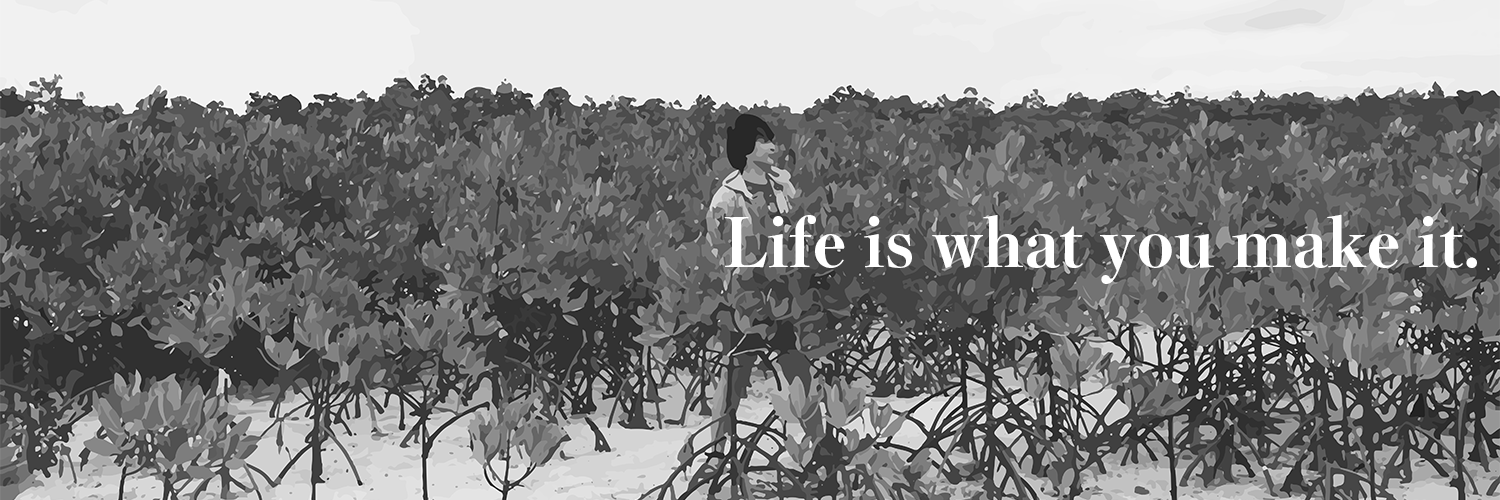
<style>
.page{position:relative;width:1500px;height:500px}
.page>*{position:absolute;margin:0}
.t1{font:66.7px "YuMin-Extrabold";color:#ffffff}
</style>
<div class="page">
<p class="t1" style="left:724px;top:214px;width:753px;height:70px">Life is what you make it.</p>
</div>
